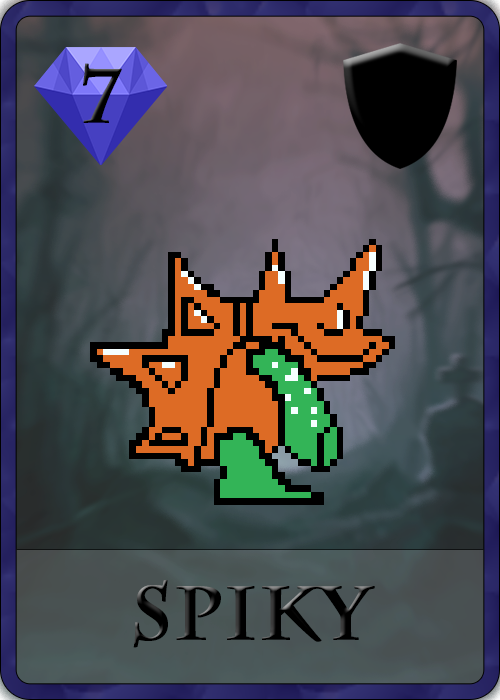
<style>
.page{position:relative;width:500px;height:700px}
.page>*{position:absolute;margin:0}
.t1{font:75px "CharlemagneStd-Bold";color:#000000;font-weight:bold}
</style>
<div class="page">
<p class="t1" style="left:83px;top:63px;width:39px;height:60px">7</p>
<p class="t1" style="left:133px;top:580px;width:242px;height:68px">Spiky</p>
</div>
